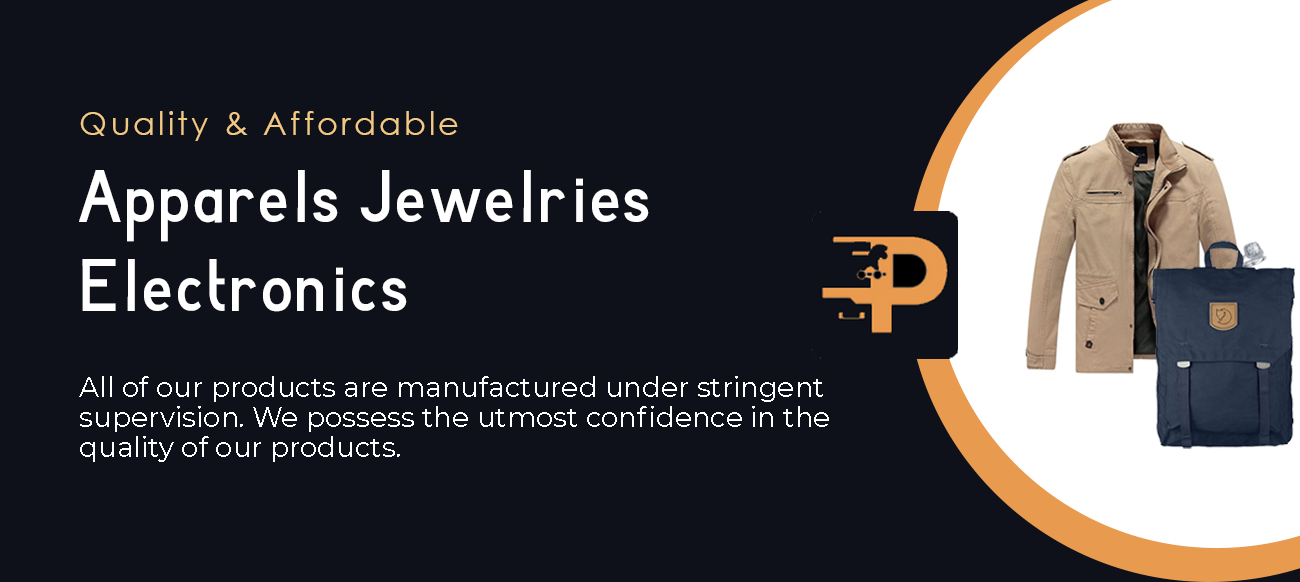
<style>
.page{position:relative;width:1300px;height:582px;background:#0e1119}
.page>*{position:absolute;margin:0}
.t1{font:32px "CenturyGothic";letter-spacing:0.1em;color:#f2c983}
.t2{font:52px "Agoestoesan";letter-spacing:0.1em;color:#ffffff}
.t3{font:28px/30px "Montserrat-Regular";color:#ffffff}
</style>
<div class="page">
<p class="t1" style="left:80px;top:111px;width:378px;height:30px">Quality &amp; Affordable</p>
<p class="t2" style="left:79px;top:170px;width:259px;height:72px">Apparels</p>
<p class="t2" style="left:360px;top:170px;width:289px;height:52px">Jewelries</p>
<p class="t2" style="left:82px;top:259px;width:325px;height:53px">Electronics</p>
<p class="t3" style="left:79px;top:376px;width:750px;height:86px">All of our products are manufactured under stringent <br>supervision. We possess the utmost confidence in the<br>quality of our products.</p>
</div>
